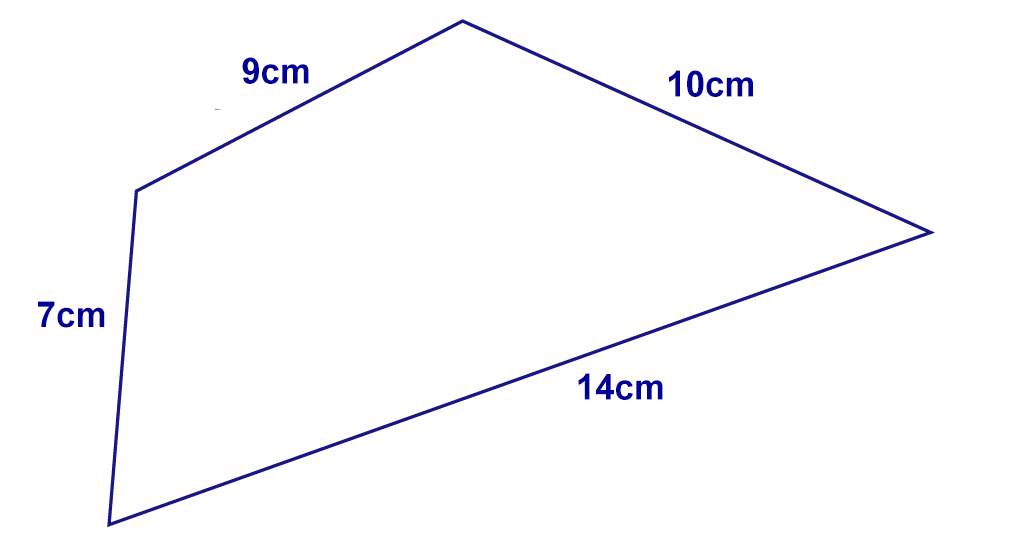
<style>
.page{position:relative;width:1024px;height:546px;background:#ffffff}
.page>*{position:absolute;margin:0}
.t1{font:36px "Arial-BoldMT";color:#000099}
</style>
<div class="page">
<p class="t1" style="left:242px;top:57px;width:67px;height:27px">9cm</p>
<p class="t1" style="left:669px;top:70px;width:84px;height:27px">10cm</p>
<p class="t1" style="left:38px;top:301px;width:67px;height:27px">7cm</p>
<p class="t1" style="left:578px;top:373px;width:85px;height:27px">14cm</p>
</div>
